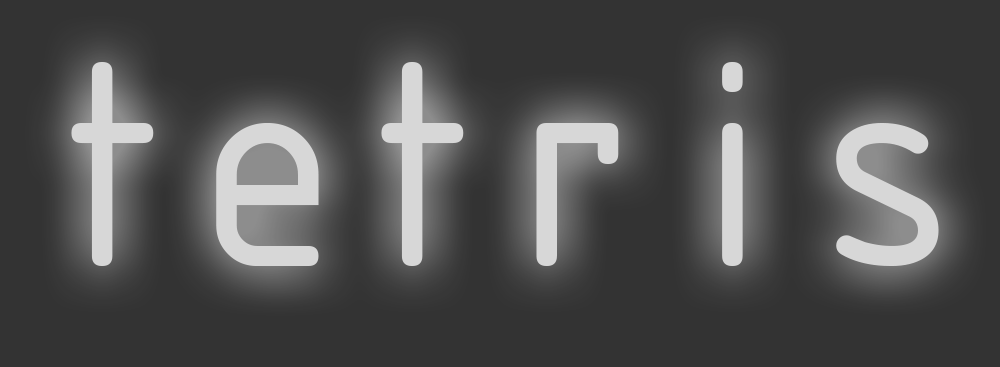
<style>
.page{position:relative;width:1000px;height:367px;background:#333333}
.page>*{position:absolute;margin:0}
.t1{font:317.2px "ISOCTEUR";letter-spacing:-0.22em;color:#d7d7d7}
</style>
<div class="page">
<p class="t1" style="left:71px;top:62px;width:868px;height:204px">tetris</p>
</div>
